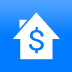
<style>
.page{position:relative;width:72px;height:72px;background:#007aff}
.page>*{position:absolute;margin:0}
.t1{font:28.3px "Roboto-Regular";color:#007aff;scale:1.15 1}
</style>
<div class="page">
<p class="t1" style="left:29px;top:27px;width:15px;height:27px">$</p>
</div>
